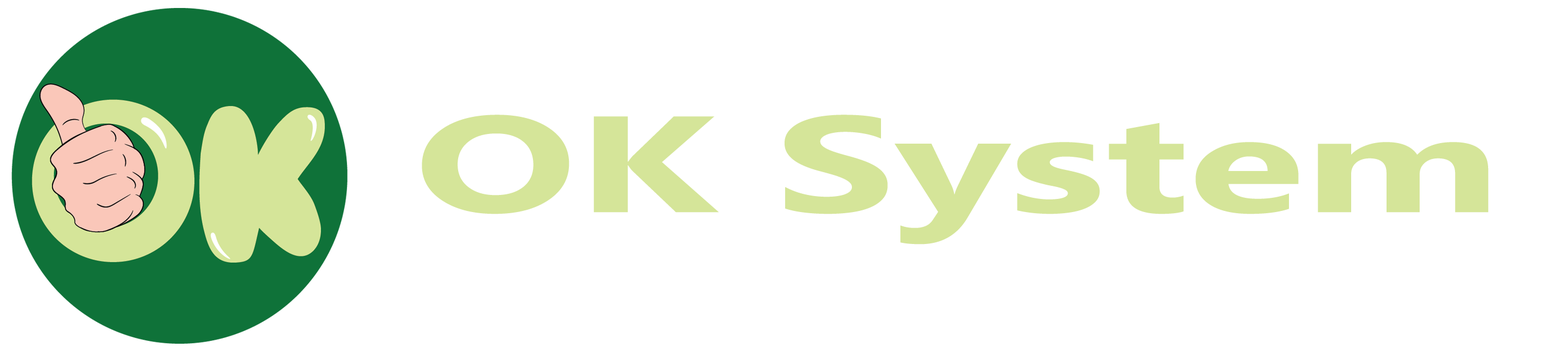
<style>
.page{position:relative;width:1568px;height:354px;background:#ffffff}
.page>*{position:absolute;margin:0}
.t1{font:136.8px "MicrosoftTaiLe-Bold";color:#d5e599;scale:1.57 1}
</style>
<div class="page">
<p class="t1" style="left:422px;top:115px;width:1067px;height:130px">OK System</p>
</div>
